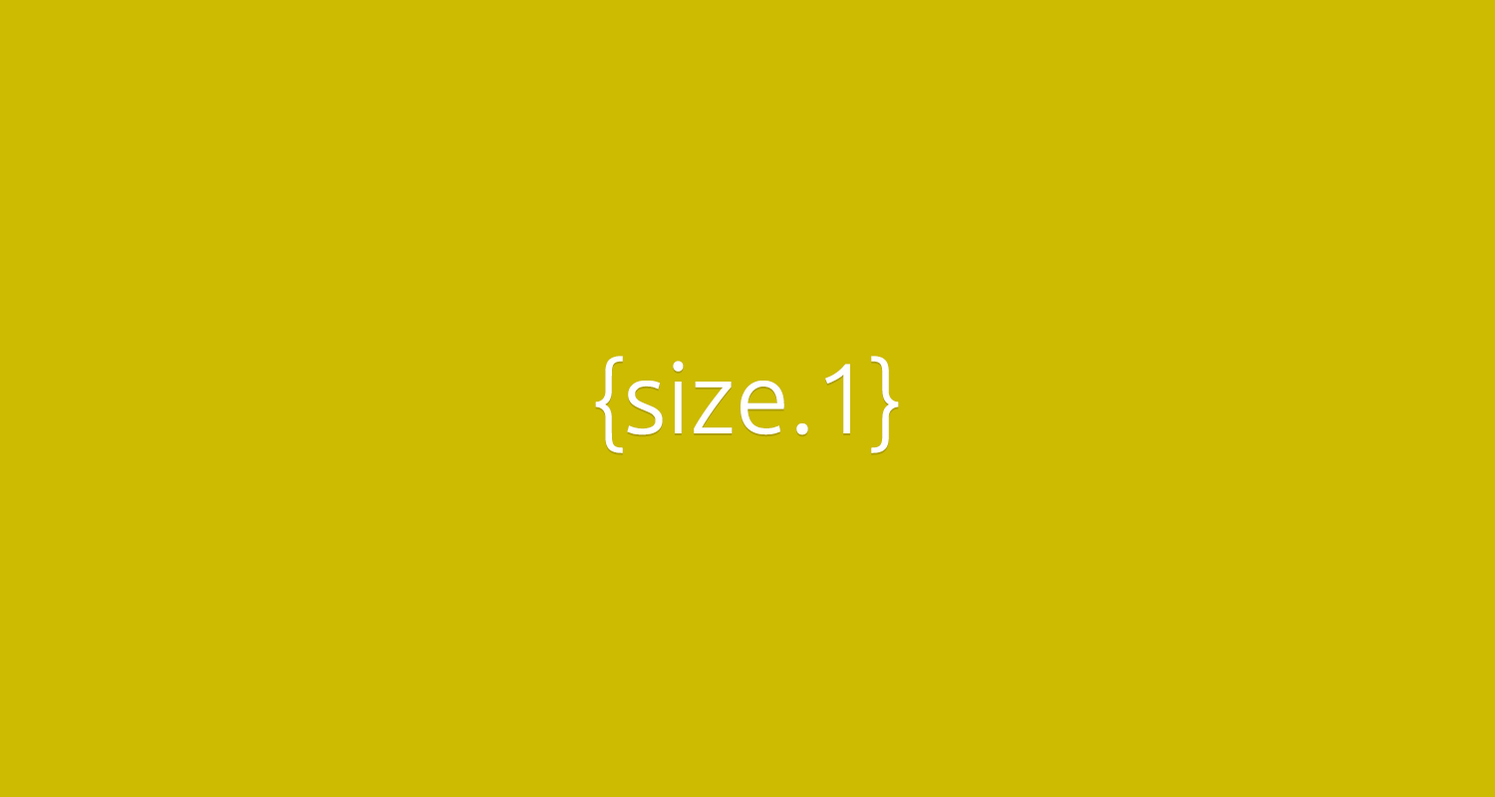
<style>
.page{position:relative;width:1495px;height:797px;background:#ccbb00}
.page>*{position:absolute;margin:0}
.t1{font:99.7px "Ubuntu-Light";color:#ffffff}
</style>
<div class="page">
<p class="t1" style="left:595px;top:356px;width:304px;height:98px">{size.0}</p>
<p class="t1" style="left:595px;top:356px;width:304px;height:98px">{size.1}</p>
</div>
